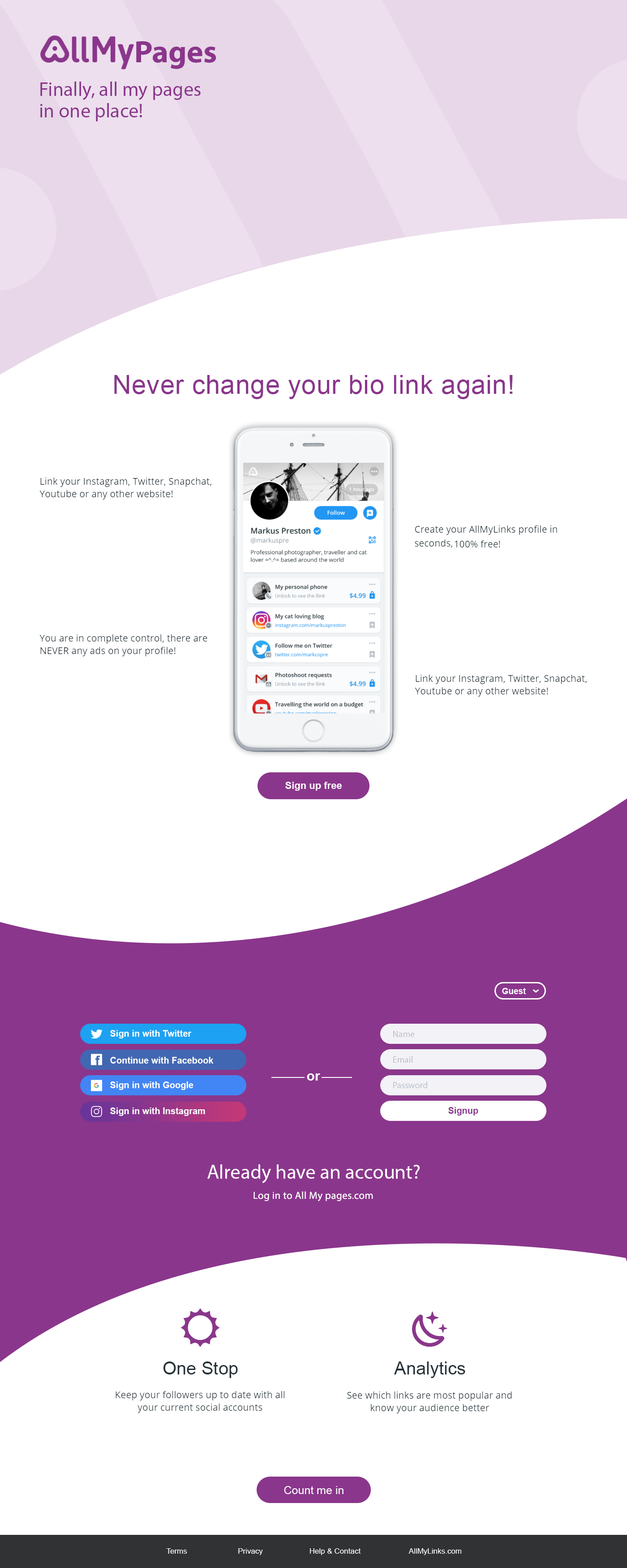
<style>
.page{position:relative;width:627px;height:1568px;background:#ffffff}
.page>*{position:absolute;margin:0}
.t1{font:31.4px "MyriadPro-Bold";color:#8a368c}
.t2{font:19.7px/21.5px "MyriadPro-Regular";color:#8a368c}
.t3{font:26px "ArialMT";letter-spacing:0.02em;color:#8a368c}
.t4{font:9.9px "Arial-BoldMT";color:#ffffff}
.t5{font:8.5px "Arial-BoldMT";color:#ffffff}
.t6{font:9px "Arial-BoldMT";color:#ffffff}
.t7{font:9px "MyriadPro-Regular";color:#bec4cc}
.t8{font:13.1px "Arial-BoldMT";letter-spacing:0.08em;color:#4267b2}
.t9{font:13.4px "Arial-BoldMT";color:#ffffff}
.t10{font:9px "Arial-BoldMT";color:#8b388d}
.t11{font:20.2px "MyriadPro-Regular";color:#ffffff}
.t12{font:10.3px "MyriadPro-Regular";letter-spacing:0.02em;color:#ffffff}
.t13{font:17.9px "ArialMT";color:#263238}
.t14{font:11.2px "ArialMT";color:#ffffff}
.t15{font:7.6px "ArialMT";color:#ffffff}
</style>
<div class="page">
<p class="t1" style="left:136px;top:41px;width:80px;height:28px">Pages</p>
<p class="t2" style="left:40px;top:82px;width:161px;height:39px">Finally, all my pages<br>in one place!</p>
<p class="t3" style="left:114px;top:375px;width:399px;height:24px">Never change your bio link again!</p>
<p class="t4" style="left:285px;top:782px;width:57px;height:9px">Sign up free</p>
<p class="t5" style="left:502px;top:988px;width:24px;height:6px">Guest</p>
<p class="t6" style="left:110px;top:1030px;width:82px;height:8px">Sign in with Twitter</p>
<p class="t7" style="left:393px;top:1031px;width:21px;height:6px">Name</p>
<p class="t8" style="left:95px;top:1055px;width:5px;height:10px">f</p>
<p class="t6" style="left:110px;top:1057px;width:104px;height:7px">Continue with Facebook</p>
<p class="t7" style="left:393px;top:1056px;width:20px;height:7px">Email</p>
<p class="t9" style="left:307px;top:1073px;width:13px;height:8px">or</p>
<p class="t6" style="left:110px;top:1081px;width:84px;height:9px">Sign in with Google</p>
<p class="t7" style="left:393px;top:1081px;width:34px;height:7px">Password</p>
<p class="t6" style="left:110px;top:1107px;width:95px;height:9px">Sign in with lnstagram</p>
<p class="t10" style="left:448px;top:1107px;width:30px;height:9px">Signup</p>
<p class="t11" style="left:207px;top:1164px;width:213px;height:19px">Already have an account?</p>
<p class="t12" style="left:254px;top:1191px;width:119px;height:11px">Log in to All My pages.com</p>
<p class="t13" style="left:163px;top:1361px;width:75px;height:17px">One Stop</p>
<p class="t13" style="left:394px;top:1361px;width:71px;height:17px">Analytics</p>
<p class="t14" style="left:284px;top:1486px;width:60px;height:8px">Count me in</p>
<p class="t15" style="left:166px;top:1548px;width:295px;height:7px">Terms                        Privacy                      Help &amp; Contact                       AllMyLinks.com</p>
</div>
